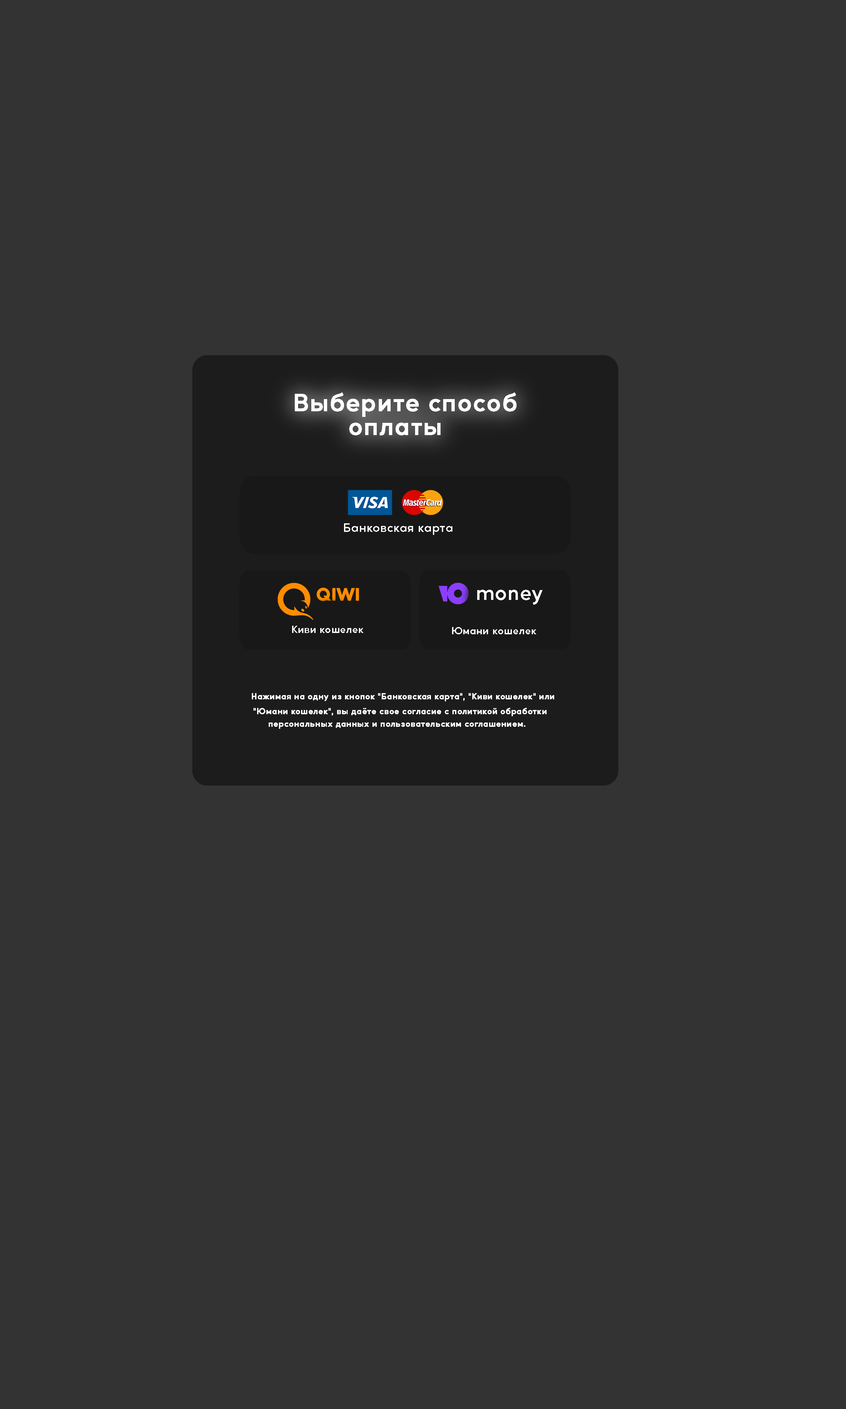
<style>
.page{position:relative;width:846px;height:1409px;background:#333333}
.page>*{position:absolute;margin:0}
.t1{font:23.8px/23.8px "MusticaPro-SemiBold";letter-spacing:0.05em;color:#ffffff;font-weight:bold}
.t2{font:11.9px "MusticaPro-SemiBold";letter-spacing:0.05em;color:#ffffff}
.t3{font:19.8px "MusticaPro-SemiBold";letter-spacing:0.05em;color:#ffffff}
.t4{font:9.9px "MusticaPro-SemiBold";letter-spacing:0.05em;color:#ffffff}
.t5{font:7.9px "MusticaPro-SemiBold";letter-spacing:0.05em;color:#ffffff;font-weight:bold}
</style>
<div class="page">
<p class="t1" style="left:295px;top:393px;width:222px;height:43px">Выберите способ<br>       оплаты</p>
<p class="t2" style="left:344px;top:523px;width:108px;height:12px">Банковская карта</p>
<p class="t3" style="left:477px;top:590px;width:66px;height:15px">money</p>
<p class="t4" style="left:292px;top:626px;width:72px;height:7px">Киви кошелек</p>
<p class="t4" style="left:452px;top:627px;width:84px;height:8px">Юмани кошелек</p>
<p class="t5" style="left:252px;top:693px;width:302px;height:9px">Нажимая на одну из кнопок "Банковская карта", "Киви кошелек" или</p>
<p class="t5" style="left:253px;top:708px;width:294px;height:8px">"Юмани кошелек", вы даёте свое согласие с политикой обработки</p>
<p class="t5" style="left:269px;top:723px;width:256px;height:6px">персональных данных и пользовательским соглашением.</p>
</div>
